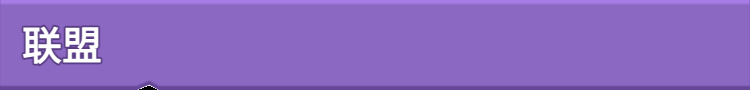
<style>
.page{position:relative;width:750px;height:90px;background:#8b68c1}
.page>*{position:absolute;margin:0}
.t1{font:40px "WebPSD-18463539-0-Regular";color:#ffffff;font-weight:bold}
</style>
<div class="page">
<p class="t1" style="left:20px;top:16px;width:200px;height:58px">联盟</p>
</div>
